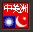
<style>
.page{position:relative;width:33px;height:32px;background:#333333}
.page>*{position:absolute;margin:0}
.t1{font:10.4px "SimSun";letter-spacing:-0.25em;color:#ffffff}
</style>
<div class="page">
<p class="t1" style="left:4px;top:4px;width:24px;height:9px">中美洲</p>
</div>
